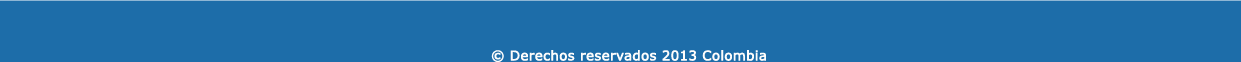
<style>
.page{position:relative;width:1241px;height:62px;background:#1d6da9}
.page>*{position:absolute;margin:0}
.t1{font:13.3px "Verdana";color:#fefdfc;font-weight:bold}
</style>
<div class="page">
<p class="t1" style="left:491px;top:50px;width:275px;height:12px">© Derechos reservados 2013 Colombia</p>
</div>
